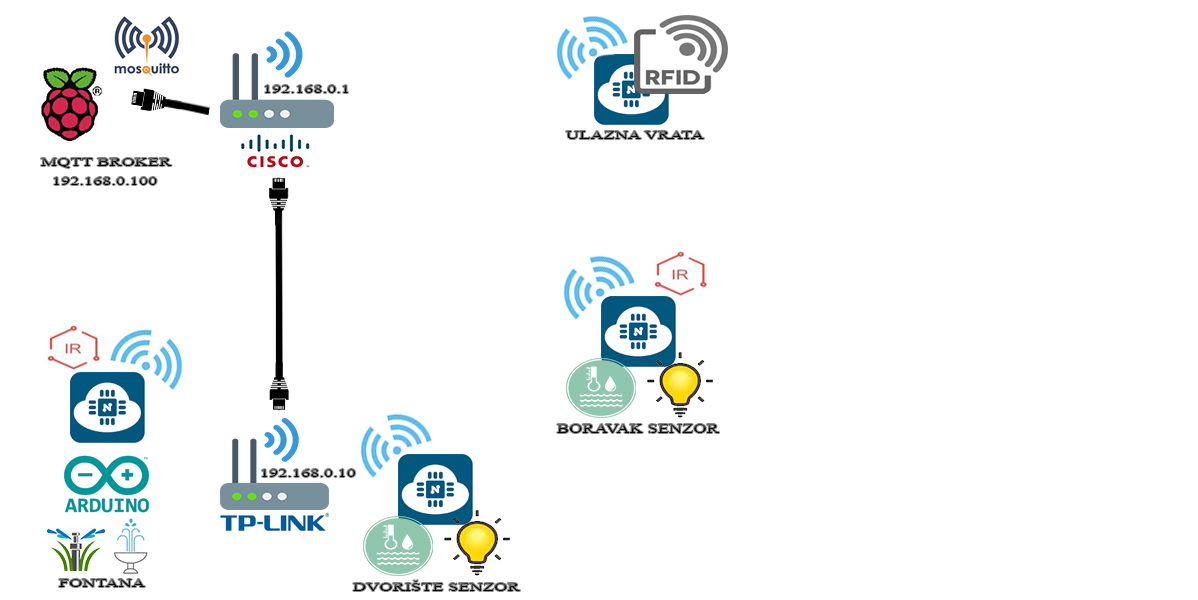
<style>
.page{position:relative;width:1198px;height:600px;background:#ffffff}
.page>*{position:absolute;margin:0}
.t1{font:11.4px "TimesNewRomanPSMT";color:#080707;scale:1.61 1}
.t2{font:11.4px "TimesNewRomanPSMT";color:#080707;scale:1.6 1}
.t3{font:11.4px "TimesNewRomanPSMT";scale:1.6 1}
.t4{font:11.7px "TimesNewRomanPSMT";color:#080707;scale:1.57 1}
.t5{font:11px "TimesNewRomanPSMT";color:#080707;scale:1.67 1}
.t6{font:11.4px "TimesNewRomanPSMT";scale:1.61 1}
</style>
<div class="page">
<p class="t1" style="left:265px;top:85px;width:83px;height:8px">192.168.0.1</p>
<p class="t2" style="left:566px;top:131px;width:138px;height:8px">ULAZNA VRATA</p>
<p class="t3" style="left:41px;top:158px;width:131px;height:10px">MQTT BROKER</p>
<p class="t2" style="left:54px;top:177px;width:103px;height:8px">192.168.0.100</p>
<p class="t4" style="left:557px;top:424px;width:163px;height:9px">BORAVAK SENZOR</p>
<p class="t2" style="left:262px;top:469px;width:94px;height:8px">192.168.0.10</p>
<p class="t5" style="left:59px;top:579px;width:86px;height:8px">FONTANA</p>
<p class="t6" style="left:353px;top:580px;width:167px;height:11px">DVORIŠTE SENZOR</p>
</div>
